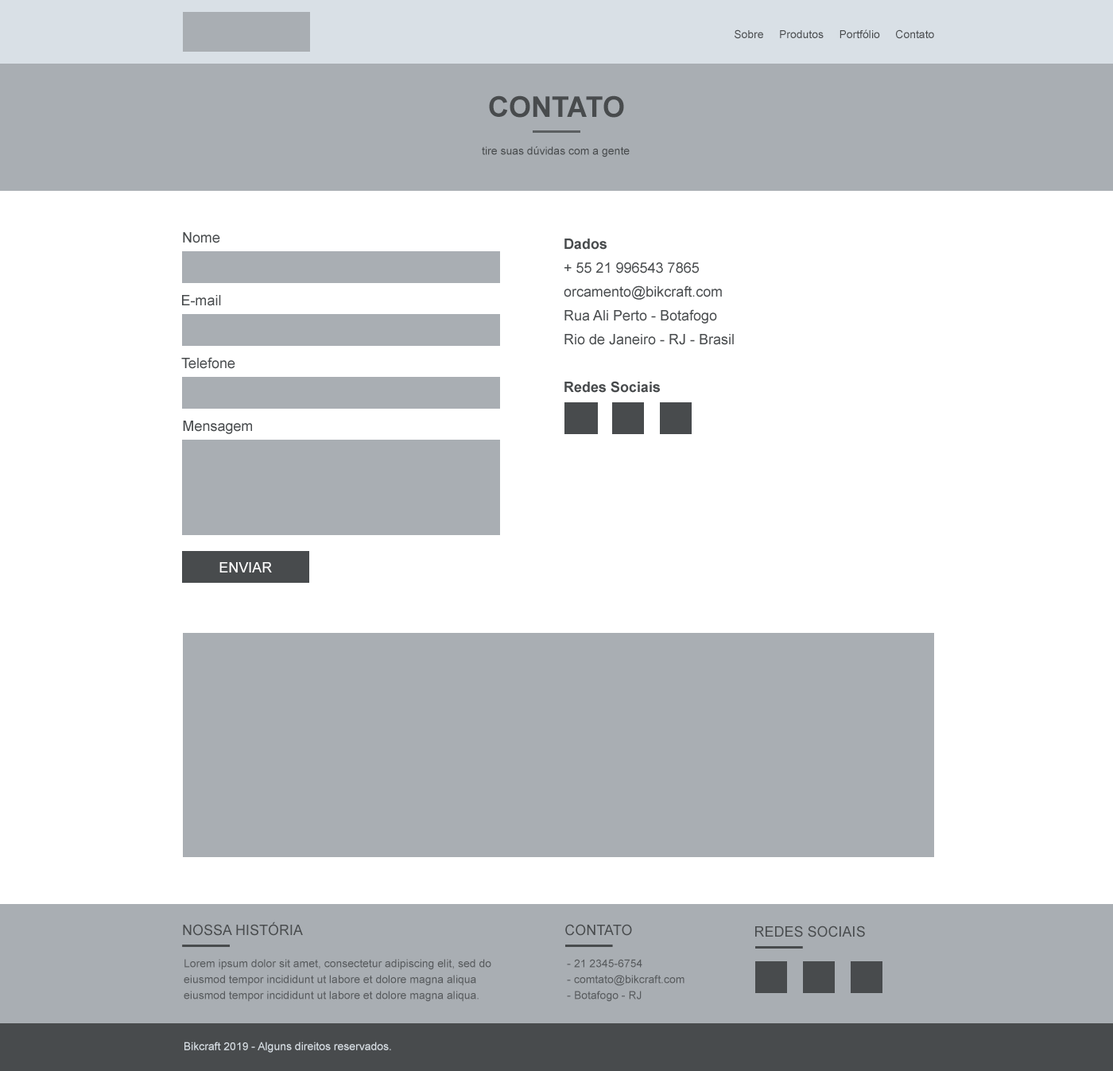
<style>
.page{position:relative;width:1113px;height:1071px;background:#ffffff}
.page>*{position:absolute;margin:0}
.t1{font:11.1px "ArialMT";color:#484b4d}
.t2{font:28.6px "Arial-BoldMT";color:#484b4d;text-transform:uppercase}
.t3{font:14.3px "ArialMT";color:#484b4d}
.t4{font:14.3px/23.9px "ArialMT";color:#484b4d}
.t5{font:14.3px/23.9px "Arial-BoldMT";color:#484b4d}
.t6{font:14.3px "ArialMT";color:#ffffff;text-transform:uppercase}
.t7{font:14.3px "ArialMT";color:#484b4d;text-transform:uppercase}
.t8{font:11.1px/15.9px "ArialMT";color:#484b4d}
.t9{font:11.1px "ArialMT";color:#d9e0e6}
</style>
<div class="page">
<p class="t1" style="left:735px;top:29px;width:199px;height:10px">Sobre     Produtos     Portfólio     Contato</p>
<p class="t2" style="left:489px;top:95px;width:135px;height:23px">contato</p>
<p class="t1" style="left:482px;top:146px;width:148px;height:11px">tire suas dúvidas com a gente</p>
<p class="t3" style="left:183px;top:232px;width:37px;height:11px">Nome</p>
<p class="t4" style="left:564px;top:239px;width:170px;height:154px"><span class="t5">Dados<br></span>+ 55 21 996543 7865<br>orcamento@bikcraft.com<br>Rua Ali Perto - Botafogo<br>Rio de Janeiro - RJ - Brasil<br><br><span class="t5">Redes Sociais</span></p>
<p class="t3" style="left:182px;top:295px;width:39px;height:11px">E-mail</p>
<p class="t3" style="left:181px;top:357px;width:54px;height:12px">Telefone</p>
<p class="t3" style="left:183px;top:421px;width:69px;height:13px">Mensagem</p>
<p class="t6" style="left:219px;top:562px;width:53px;height:11px">Enviar</p>
<p class="t7" style="left:183px;top:922px;width:120px;height:14px">Nossa História</p>
<p class="t7" style="left:565px;top:924px;width:67px;height:12px">CONTATO</p>
<p class="t7" style="left:755px;top:926px;width:110px;height:12px">REDES SOCIAIS</p>
<p class="t8" style="left:184px;top:959px;width:307px;height:43px;opacity:0.88">Lorem ipsum dolor sit amet, consectetur adipiscing elit, sed do eiusmod tempor incididunt ut labore et dolore magna aliqua<br>eiusmod tempor incididunt ut labore et dolore magna aliqua.</p>
<p class="t8" style="left:567px;top:959px;width:118px;height:43px;opacity:0.88">- 21 2345-6754<br>- comtato@bikcraft.com<br>- Botafogo - RJ</p>
<p class="t9" style="left:184px;top:1042px;width:207px;height:11px">Bikcraft 2019 - Alguns direitos reservados.</p>
</div>
